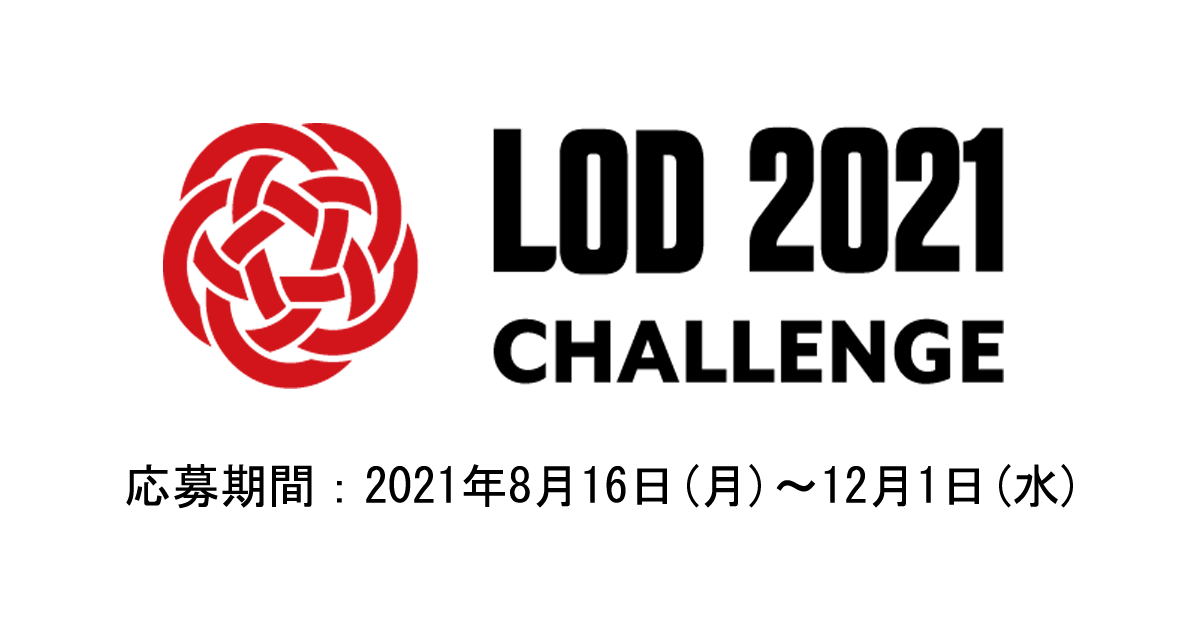
<style>
.page{position:relative;width:1200px;height:630px;background:#ffffff}
.page>*{position:absolute;margin:0}
.t1{font:48px "MS-Gothic";color:#000000}
</style>
<div class="page">
<p class="t1" style="left:126px;top:464px;width:947px;height:45px">応募期間：2021年8月16日(月)～12月1日(水)</p>
</div>
